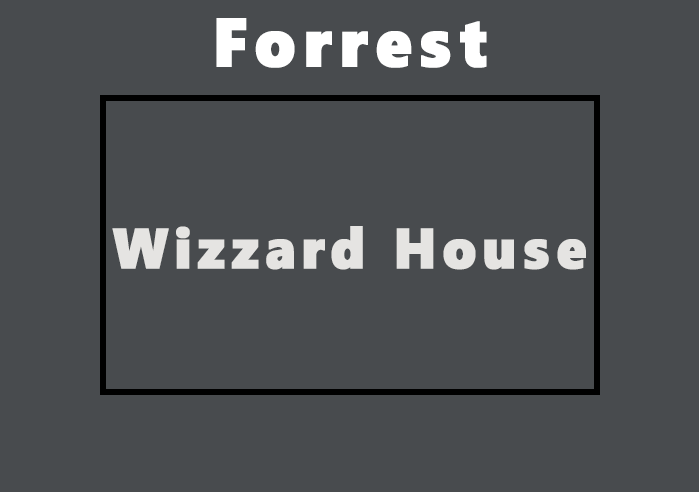
<style>
.page{position:relative;width:699px;height:492px;background:#484b4e}
.page>*{position:absolute;margin:0}
.t1{font:68.5px "SegoeWP-Black";letter-spacing:0.1em;color:#ffffff;font-weight:bold;scale:0.93 1}
.t2{font:56.7px "SegoeWP-Black";letter-spacing:0.1em;color:#e5e4e2;font-weight:bold;scale:0.93 1}
</style>
<div class="page">
<p class="t1" style="left:216px;top:18px;width:271px;height:50px">Forrest</p>
<p class="t2" style="left:112px;top:226px;width:474px;height:44px">Wizzard House</p>
</div>
